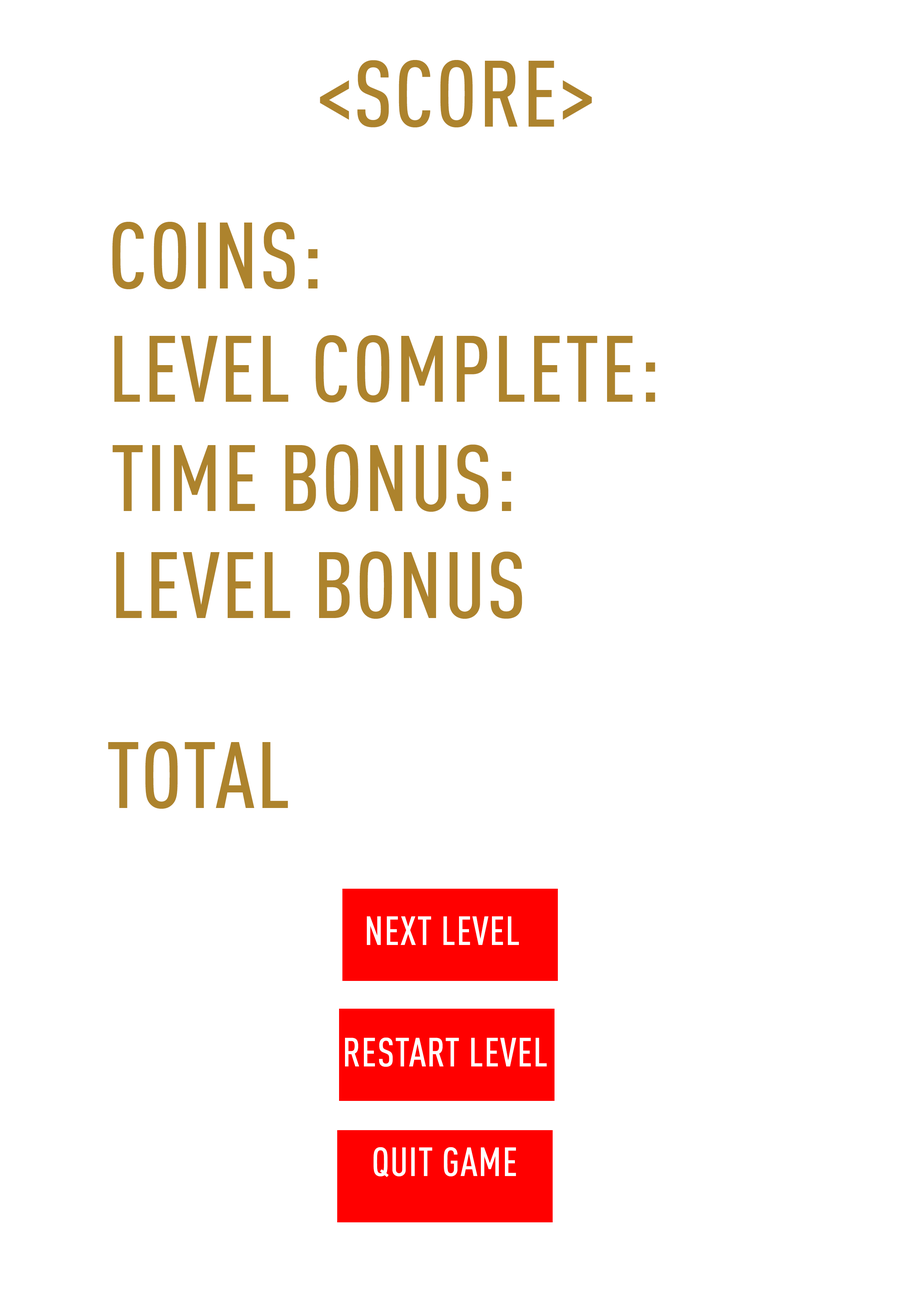
<style>
.page{position:relative;width:918px;height:1299px;background:#ffffff}
.page>*{position:absolute;margin:0}
.t1{font:92.6px "DINPro-CondMedium";letter-spacing:0.02em;color:#ad832d;text-transform:uppercase}
.t2{font:40.1px "DINPro-CondMedium";letter-spacing:0.02em;color:#fefefe;text-transform:uppercase}
</style>
<div class="page">
<p class="t1" style="left:320px;top:60px;width:272px;height:67px">&lt;SCORE&gt;</p>
<p class="t1" style="left:112px;top:222px;width:206px;height:67px">Coins:</p>
<p class="t1" style="left:114px;top:335px;width:541px;height:67px">LEVEL COMPLETE:</p>
<p class="t1" style="left:113px;top:444px;width:398px;height:68px">TIME BONUS:</p>
<p class="t1" style="left:116px;top:551px;width:406px;height:68px">LEVEL BONUS</p>
<p class="t1" style="left:108px;top:741px;width:180px;height:68px">TOTAL</p>
<p class="t2" style="left:367px;top:916px;width:152px;height:29px">NEXT LEVEL</p>
<p class="t2" style="left:345px;top:1037px;width:202px;height:30px">Restart LEVEL</p>
<p class="t2" style="left:374px;top:1147px;width:142px;height:30px">QUIT GAME</p>
</div>
